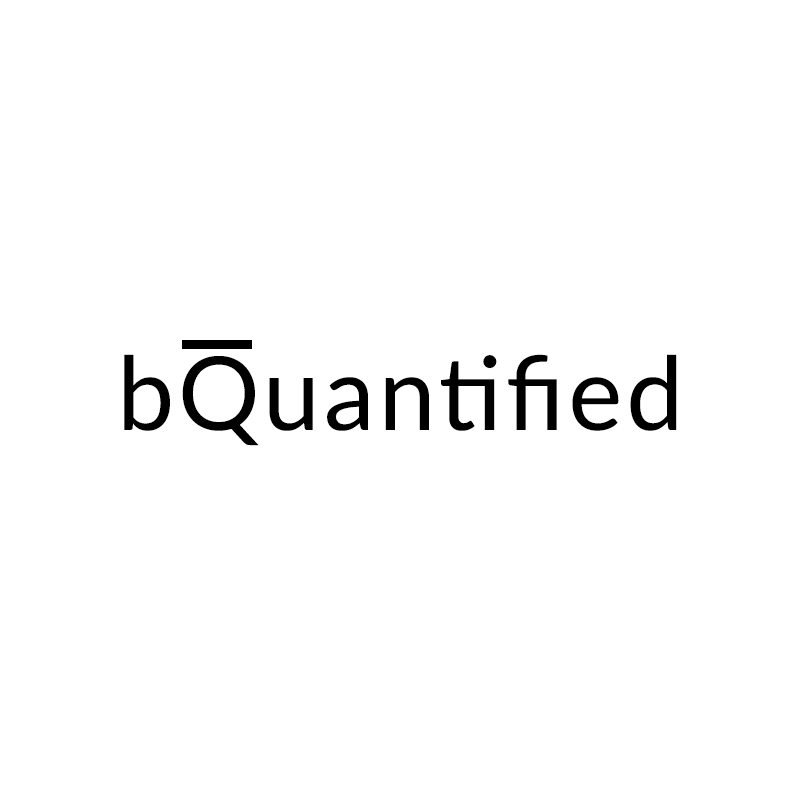
<style>
.page{position:relative;width:800px;height:800px;background:#ffffff}
.page>*{position:absolute;margin:0}
.t1{font:102px "Lato-Regular";letter-spacing:0.04em;color:#000000}
</style>
<div class="page">
<p class="t1" style="left:124px;top:354px;width:553px;height:92px">bQuantified</p>
</div>
